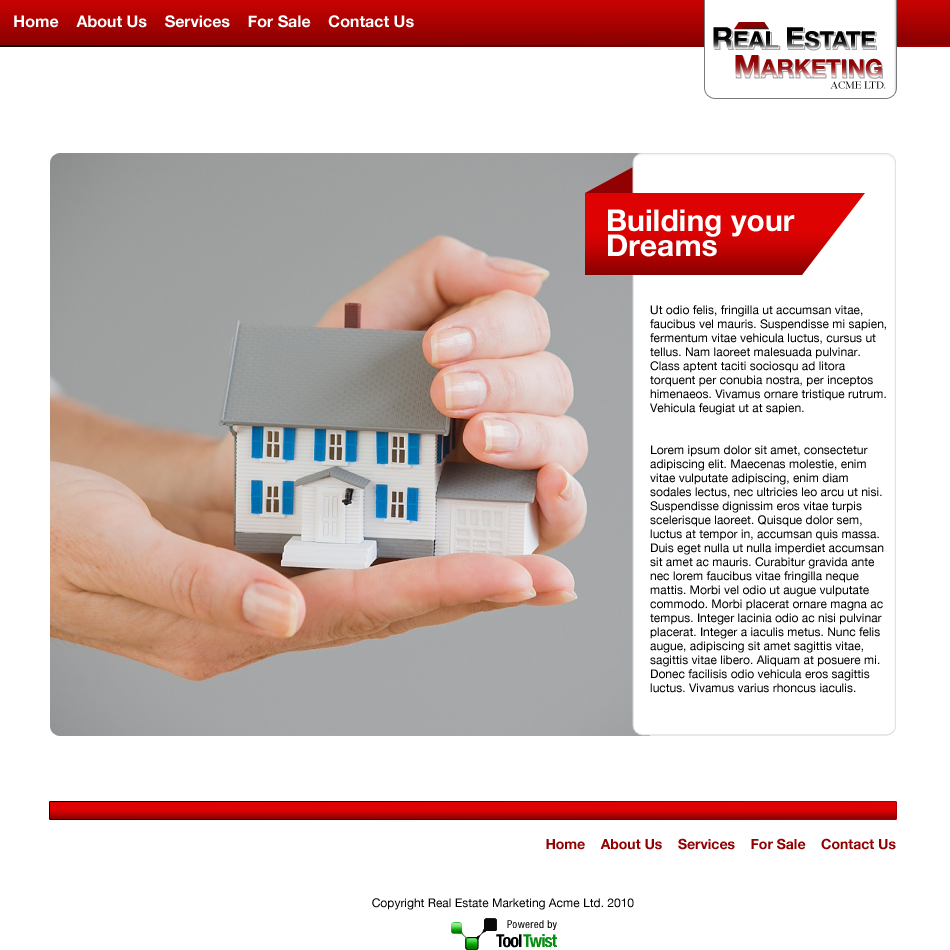
<style>
.page{position:relative;width:950px;height:950px;background:#ffffff}
.page>*{position:absolute;margin:0}
.t1{font:16px "HelveticaNeue-Bold";color:#ffffff}
.t2{font:30px "HelveticaNeue-Bold";color:#ffffff}
.t3{font:12px/14px "HelveticaNeue";color:#000000}
.t4{font:14px "HelveticaNeue-Bold";color:#910101}
.t5{font:12px "HelveticaNeue";color:#000000}
</style>
<div class="page">
<p class="t1" style="left:14px;top:15px;width:400px;height:13px">Home    About Us    Services    For Sale    Contact Us</p>
<p class="t2" style="left:608px;top:209px;width:187px;height:48px">Building your Dreams</p>
<p class="t3" style="left:650px;top:305px;width:236px;height:388px">Ut odio felis, fringilla ut accumsan vitae, faucibus vel mauris. Suspendisse mi sapien, fermentum vitae vehicula luctus, cursus ut tellus. Nam laoreet malesuada pulvinar. Class aptent taciti sociosqu ad litora torquent per conubia nostra, per inceptos himenaeos. Vivamus ornare tristique rutrum. Vehicula feugiat ut at sapien.<br><br><br>Lorem ipsum dolor sit amet, consectetur adipiscing elit. Maecenas molestie, enim vitae vulputate adipiscing, enim diam sodales lectus, nec ultricies leo arcu ut nisi. Suspendisse dignissim eros vitae turpis scelerisque laoreet. Quisque dolor sem, luctus at tempor in, accumsan quis massa. Duis eget nulla ut nulla imperdiet accumsan sit amet ac mauris. Curabitur gravida ante nec lorem faucibus vitae fringilla neque mattis. Morbi vel odio ut augue vulputate commodo. Morbi placerat ornare magna ac tempus. Integer lacinia odio ac nisi pulvinar placerat. Integer a iaculis metus. Nunc felis augue, adipiscing sit amet sagittis vitae, sagittis vitae libero. Aliquam at posuere mi. Donec facilisis odio vehicula eros sagittis luctus. Vivamus varius rhoncus iaculis.</p>
<p class="t4" style="left:546px;top:838px;width:350px;height:12px">Home    About Us    Services    For Sale    Contact Us</p>
<p class="t5" style="left:372px;top:898px;width:262px;height:12px">Copyright Real Estate Marketing Acme Ltd. 2010</p>
</div>
